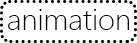
<style>
.page{position:relative;width:137px;height:43px;background:#ffffff}
.page>*{position:absolute;margin:0}
.t1{font:30px "SegoeUI-Light";color:#000000}
</style>
<div class="page">
<p class="t1" style="left:8px;top:9px;width:122px;height:21px">animation</p>
</div>
